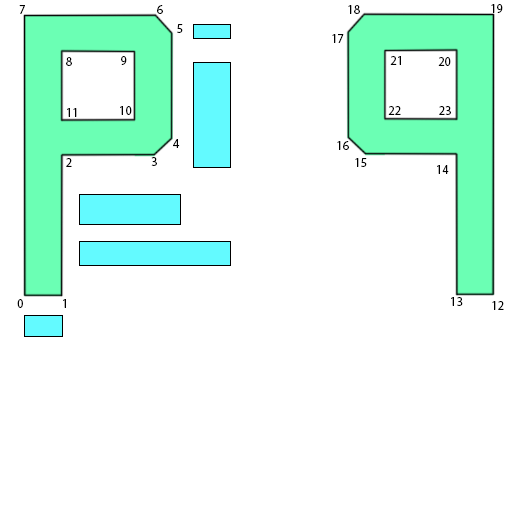
<style>
.page{position:relative;width:512px;height:512px;background:#ffffff}
.page>*{position:absolute;margin:0}
.t1{font:12.5px "MyriadPro-Regular";color:#000000}
</style>
<div class="page">
<p class="t1" style="left:19px;top:5px;width:6px;height:9px">7</p>
<p class="t1" style="left:157px;top:5px;width:6px;height:9px">6</p>
<p class="t1" style="left:348px;top:5px;width:12px;height:9px">18</p>
<p class="t1" style="left:491px;top:4px;width:12px;height:9px">19</p>
<p class="t1" style="left:177px;top:24px;width:6px;height:9px">5</p>
<p class="t1" style="left:332px;top:34px;width:12px;height:9px">17</p>
<p class="t1" style="left:66px;top:57px;width:6px;height:9px">8</p>
<p class="t1" style="left:121px;top:56px;width:6px;height:9px">9</p>
<p class="t1" style="left:390px;top:56px;width:11px;height:9px">21</p>
<p class="t1" style="left:438px;top:57px;width:13px;height:9px">20</p>
<p class="t1" style="left:67px;top:108px;width:10px;height:9px">11</p>
<p class="t1" style="left:120px;top:106px;width:12px;height:9px">10</p>
<p class="t1" style="left:388px;top:106px;width:13px;height:9px">22</p>
<p class="t1" style="left:439px;top:106px;width:12px;height:9px">23</p>
<p class="t1" style="left:173px;top:139px;width:7px;height:9px">4</p>
<p class="t1" style="left:337px;top:141px;width:12px;height:9px">16</p>
<p class="t1" style="left:66px;top:158px;width:6px;height:9px">2</p>
<p class="t1" style="left:151px;top:157px;width:6px;height:9px">3</p>
<p class="t1" style="left:355px;top:158px;width:12px;height:9px">15</p>
<p class="t1" style="left:437px;top:165px;width:12px;height:9px">14</p>
<p class="t1" style="left:17px;top:299px;width:6px;height:9px">0</p>
<p class="t1" style="left:63px;top:299px;width:3px;height:9px">1</p>
<p class="t1" style="left:451px;top:297px;width:12px;height:9px">13</p>
<p class="t1" style="left:492px;top:301px;width:12px;height:9px">12</p>
</div>
